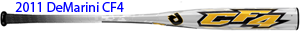
<style>
.page{position:relative;width:300px;height:31px;background:#ffffff}
.page>*{position:absolute;margin:0}
.t1{font:14px "MyriadPro-Regular";color:#0000ff}
</style>
<div class="page">
<p class="t1" style="left:15px;top:2px;width:109px;height:10px">2011 DeMarini CF4</p>
</div>
